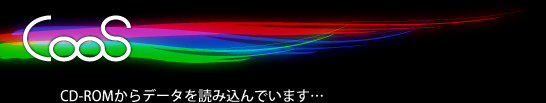
<style>
.page{position:relative;width:546px;height:103px;background:#000000}
.page>*{position:absolute;margin:0}
.t1{font:14px "KozGoStd-Medium";color:#ffffff}
</style>
<div class="page">
<p class="t1" style="left:60px;top:88px;width:263px;height:15px">CD-ROMからデータを読み込んでいます…</p>
</div>
